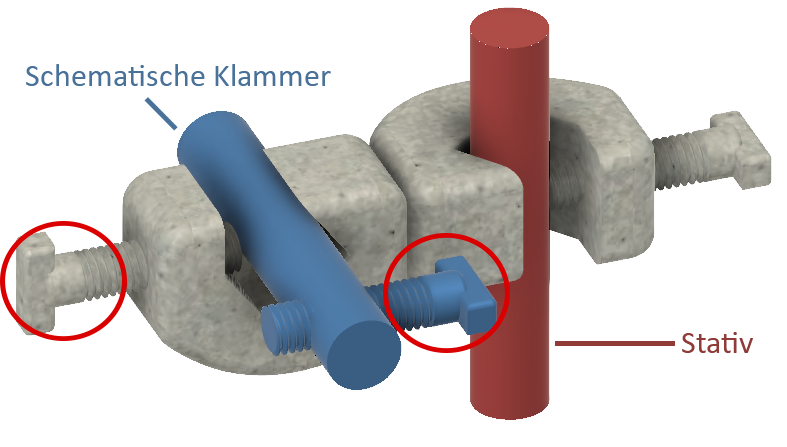
<style>
.page{position:relative;width:787px;height:447px;background:#ffffff}
.page>*{position:absolute;margin:0}
.t1{font:32px "Calibri";color:#49729b}
.t2{font:32px "Calibri";color:#913b38}
</style>
<div class="page">
<p class="t1" style="left:26px;top:64px;width:305px;height:22px">Schematische Klammer</p>
<p class="t2" style="left:682px;top:332px;width:71px;height:21px">Stativ</p>
</div>
